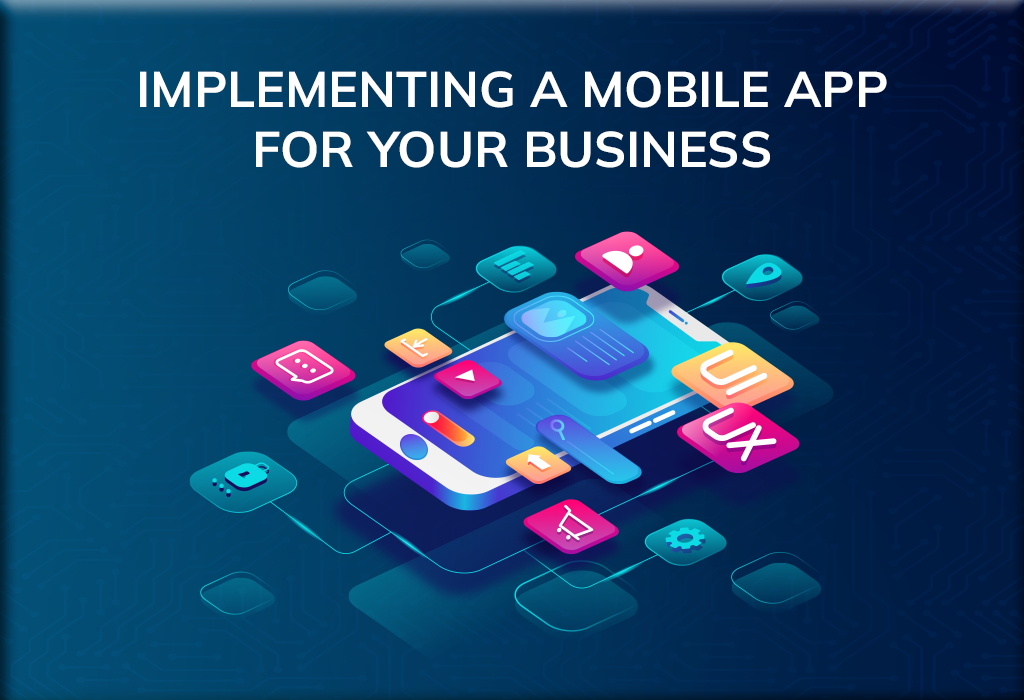
<style>
.page{position:relative;width:1024px;height:700px}
.page>*{position:absolute;margin:0}
.t1{font:50px "Mulish-Bold";color:#ffffff;text-transform:uppercase}
</style>
<div class="page">
<p class="t1" style="left:140px;top:71px;width:747px;height:97px;text-align:center">Implementing a Mobile App for Your Business</p>
</div>
